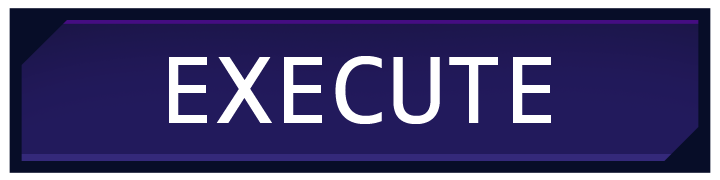
<style>
.page{position:relative;width:720px;height:180px;background:#221a5c}
.page>*{position:absolute;margin:0}
.t1{font:104.2px "Consolas";color:#ffffff}
</style>
<div class="page">
<p class="t1" style="left:169px;top:56px;width:382px;height:68px">EXECUTE</p>
</div>
